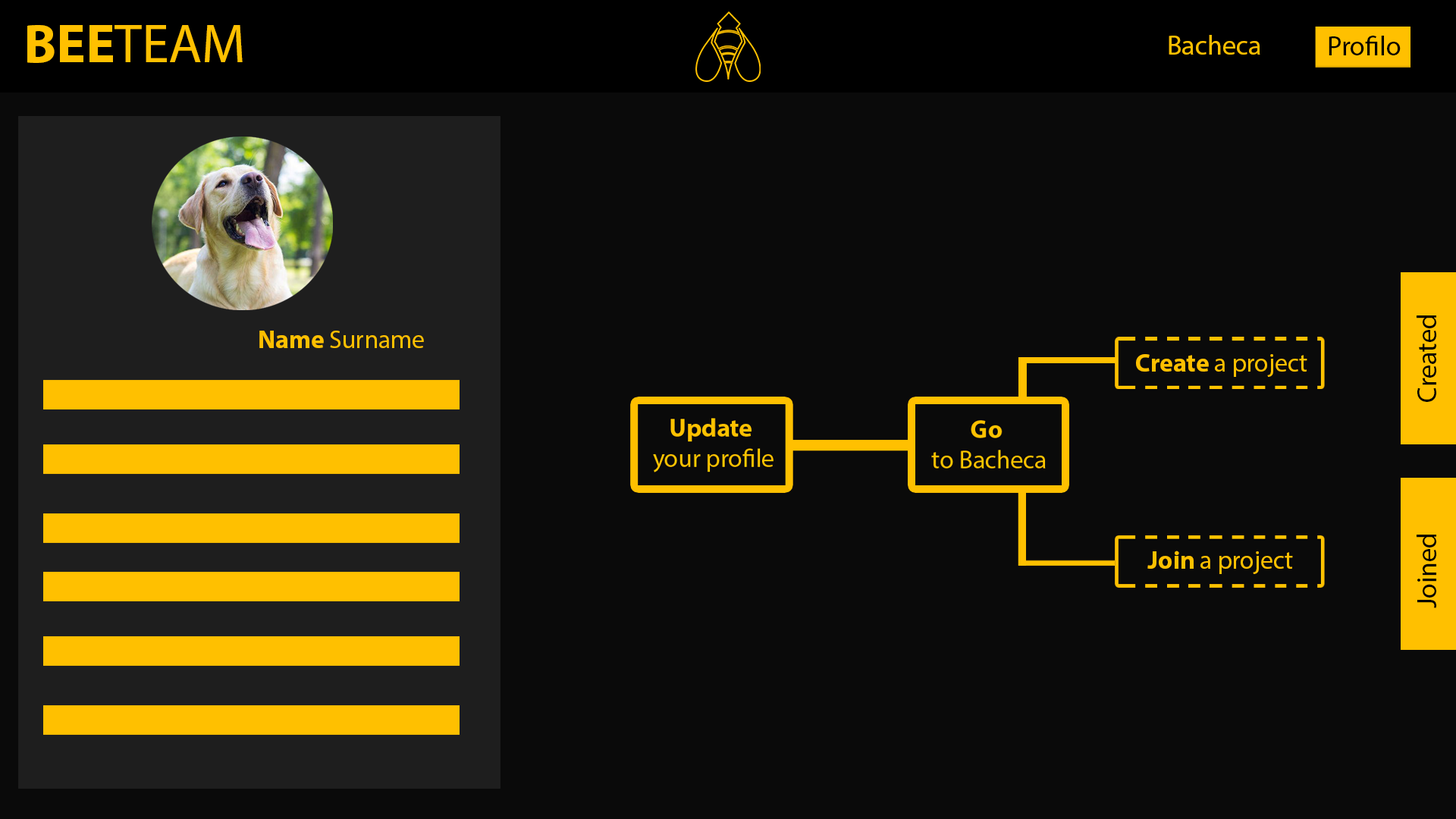
<style>
.page{position:relative;width:1456px;height:819px;background:#0a0a0a}
.page>*{position:absolute;margin:0}
.t1{font:54.6px "MyriadPro-Regular";color:#ffc000}
.t2{font:54.6px "MyriadPro-Bold";color:#ffc000}
.t3{font:27.3px "MyriadPro-Regular";color:#ffc000}
.t4{font:27.3px "MyriadPro-Regular";color:#000000}
.t5{font:25.4px "MyriadPro-Regular";color:#ffc000}
.t6{font:25.4px "MyriadPro-Bold";color:#ffc000}
</style>
<div class="page">
<p class="t1" style="left:27px;top:25px;width:216px;height:38px"><span class="t2">BEE</span>TEAM</p>
<p class="t3" style="left:1169px;top:35px;width:91px;height:20px">Bacheca</p>
<p class="t4" style="left:1329px;top:36px;width:72px;height:19px">Profilo</p>
<p class="t4" style="left:1417px;top:315px;width:19px;height:87px;rotate:-90deg">Created</p>
<p class="t5" style="left:259px;top:331px;width:165px;height:17px"><span class="t6">Name</span> Surname</p>
<p class="t5" style="left:1136px;top:354px;width:171px;height:23px"><span class="t6">Create</span> a project</p>
<p class="t4" style="left:1417px;top:535px;width:19px;height:73px;rotate:-90deg">Joined</p>
<p class="t5" style="left:1147px;top:551px;width:146px;height:23px"><span class="t6">Join</span> a project</p>
</div>
